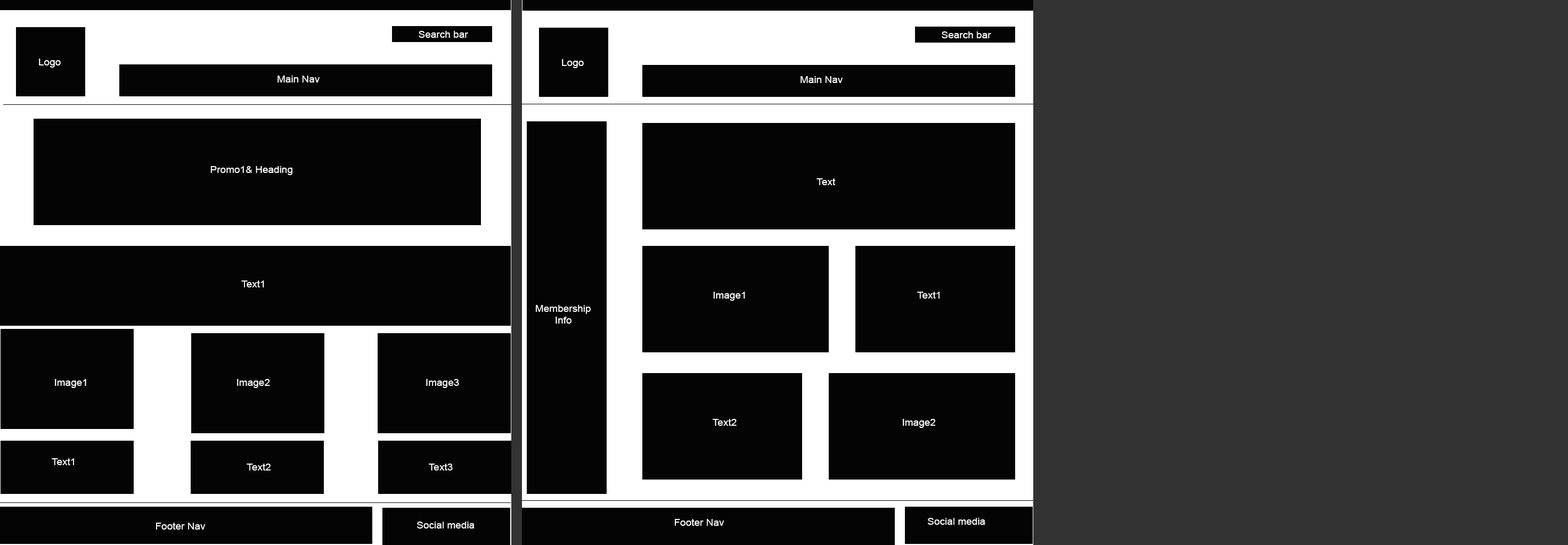
<style>
.page{position:relative;width:1568px;height:545px;background:#040404}
.page>*{position:absolute;margin:0}
.t1{font:9.6px "ArialMT";color:#fefdfd;scale:1.06 1}
</style>
<div class="page">
<p class="t1" style="left:419px;top:31px;width:49px;height:7px">Search bar</p>
<p class="t1" style="left:942px;top:31px;width:49px;height:7px">Search bar</p>
<p class="t1" style="left:39px;top:59px;width:22px;height:9px">Logo</p>
<p class="t1" style="left:562px;top:59px;width:22px;height:9px">Logo</p>
<p class="t1" style="left:277px;top:76px;width:43px;height:7px">Main Nav</p>
<p class="t1" style="left:801px;top:76px;width:42px;height:7px">Main Nav</p>
<p class="t1" style="left:210px;top:166px;width:82px;height:9px">Promo1&amp; Heading</p>
<p class="t1" style="left:816px;top:178px;width:20px;height:7px">Text</p>
<p class="t1" style="left:241px;top:281px;width:23px;height:7px">Text1</p>
<p class="t1" style="left:713px;top:292px;width:32px;height:9px">Image1</p>
<p class="t1" style="left:917px;top:292px;width:23px;height:7px">Text1</p>
<p class="t1" style="left:536px;top:305px;width:55px;height:19px">Membership<br>          Info</p>
<p class="t1" style="left:55px;top:379px;width:31px;height:9px">Image1</p>
<p class="t1" style="left:237px;top:379px;width:33px;height:9px">Image2</p>
<p class="t1" style="left:426px;top:379px;width:33px;height:9px">Image3</p>
<p class="t1" style="left:713px;top:419px;width:24px;height:7px">Text2</p>
<p class="t1" style="left:903px;top:419px;width:32px;height:9px">Image2</p>
<p class="t1" style="left:52px;top:459px;width:22px;height:7px">Text1</p>
<p class="t1" style="left:247px;top:464px;width:24px;height:7px">Text2</p>
<p class="t1" style="left:429px;top:464px;width:24px;height:7px">Text3</p>
<p class="t1" style="left:417px;top:522px;width:58px;height:7px">Social media</p>
<p class="t1" style="left:675px;top:519px;width:49px;height:7px">Footer Nav</p>
<p class="t1" style="left:928px;top:518px;width:57px;height:7px">Social media</p>
<p class="t1" style="left:156px;top:523px;width:50px;height:7px">Footer Nav</p>
</div>
